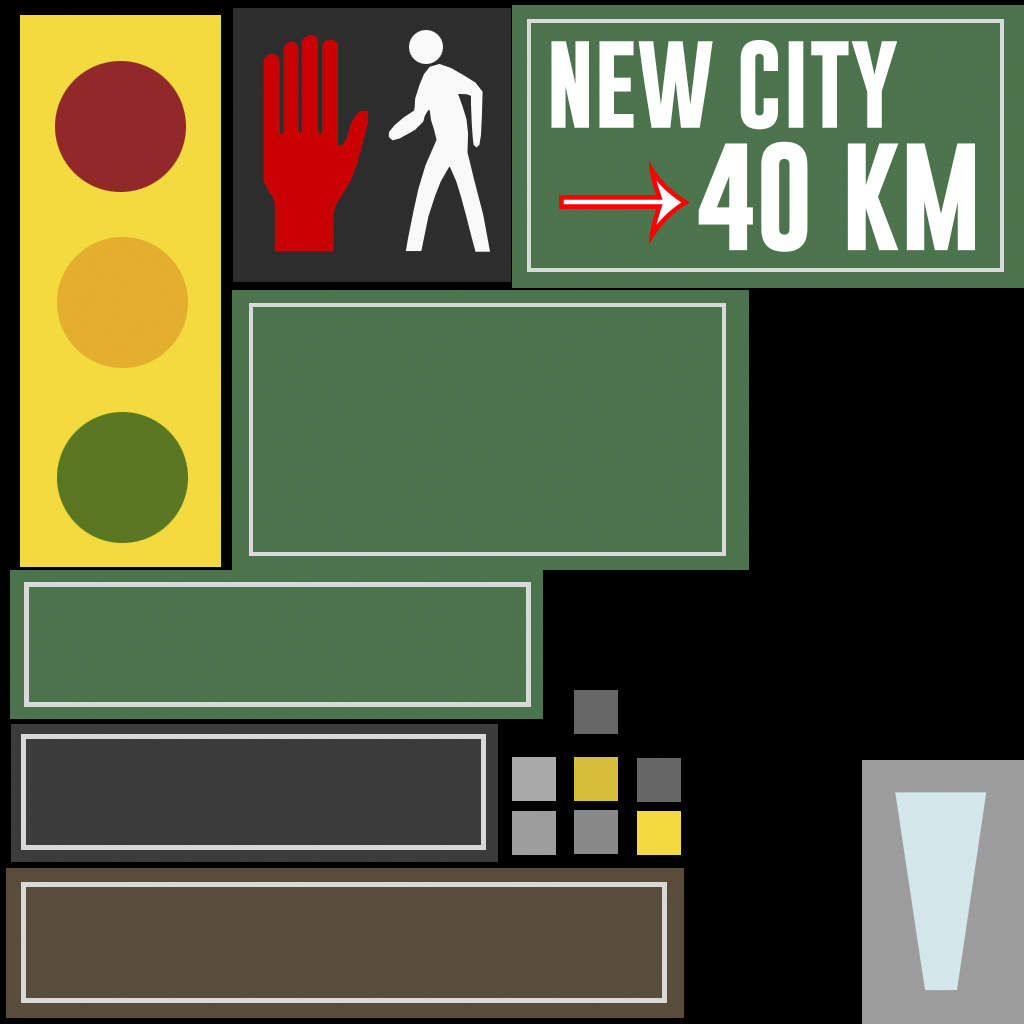
<style>
.page{position:relative;width:1024px;height:1024px;background:#000000}
.page>*{position:absolute;margin:0}
.t1{font:88.4px "GoboldBold";color:#ffffff;text-transform:uppercase}
.t2{font:109px "GoboldBold";color:#ffffff;text-transform:uppercase}
</style>
<div class="page">
<p class="t1" style="left:551px;top:40px;width:346px;height:90px">New City</p>
<p class="t2" style="left:698px;top:141px;width:277px;height:111px">40 KM</p>
</div>
